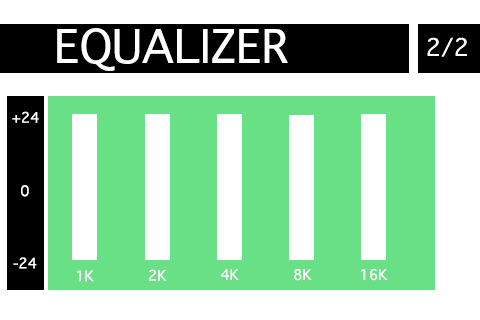
<style>
.page{position:relative;width:480px;height:320px;background:#ffffff}
.page>*{position:absolute;margin:0}
.t1{font:44.3px "Thonburi";color:#ffffff}
.t2{font:13.9px "Thonburi";color:#ffffff}
.t3{font:13.9px "Thonburi";color:#fefefe}
</style>
<div class="page">
<p class="t1" style="left:57px;top:28px;width:231px;height:43px">EQUALIZER</p>
<p class="t2" style="left:12px;top:111px;width:27px;height:12px">+24</p>
<p class="t2" style="left:21px;top:185px;width:8px;height:12px">0</p>
<p class="t2" style="left:13px;top:257px;width:24px;height:12px">-24</p>
<p class="t3" style="left:77px;top:270px;width:17px;height:12px">1K</p>
<p class="t3" style="left:149px;top:269px;width:18px;height:12px">2K</p>
<p class="t3" style="left:221px;top:269px;width:18px;height:11px">4K</p>
<p class="t3" style="left:294px;top:269px;width:18px;height:12px">8K</p>
<p class="t3" style="left:361px;top:268px;width:27px;height:13px">16K</p>
</div>
